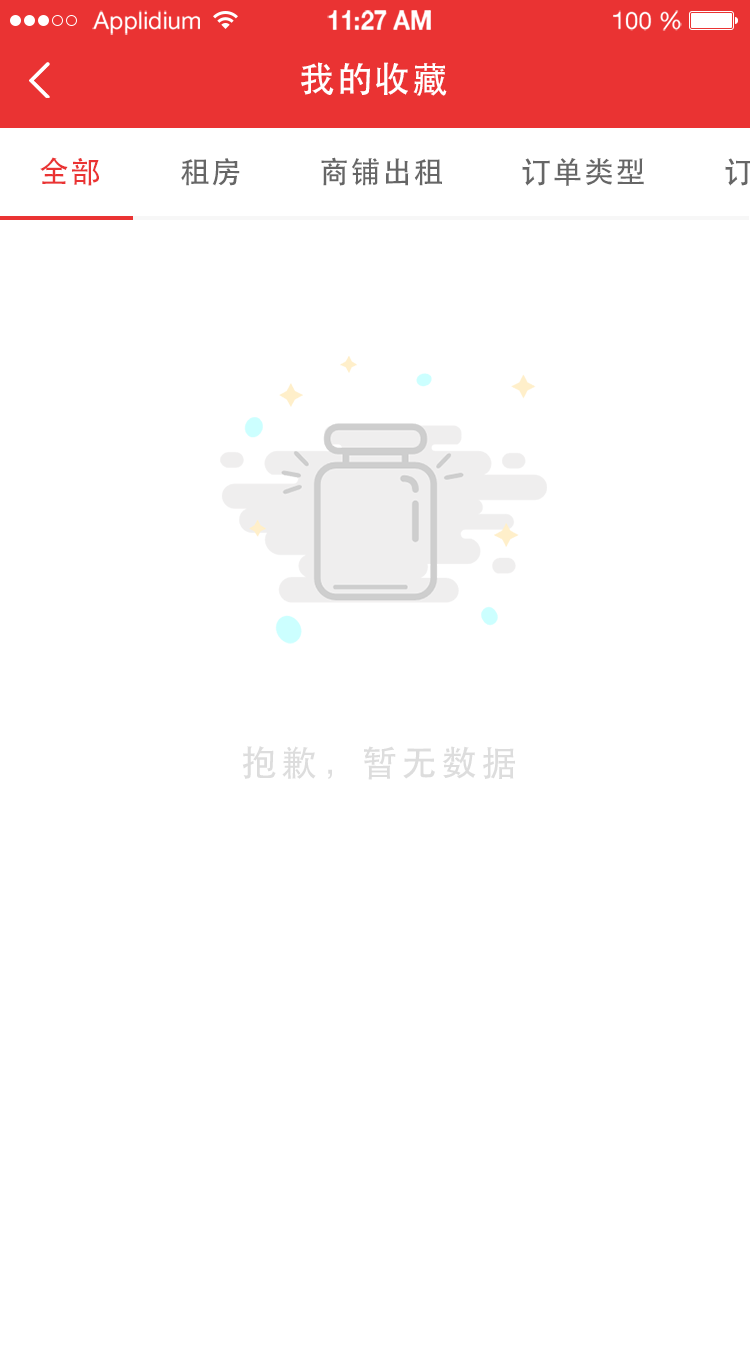
<style>
.page{position:relative;width:750px;height:1358px;background:#ffffff}
.page>*{position:absolute;margin:0}
.t1{font:24px "HelveticaNeueLTStd-Roman";color:#ffffff}
.t2{font:24px "HelveticaNeueLTStd-Bd";color:#ffffff}
.t3{font:36px "STHeiti";letter-spacing:0.05em;color:#ffffff}
.t4{font:30px "STHeiti";letter-spacing:0.05em;color:#ea3333}
.t5{font:30px "STHeiti";letter-spacing:0.05em;color:#666666}
.t6{font:36px "STHeiti";letter-spacing:0.11em;color:#dddddd}
</style>
<div class="page">
<p class="t1" style="left:92px;top:10px;width:108px;height:25px">Applidium</p>
<p class="t2" style="left:327px;top:10px;width:104px;height:20px">11:27 AM</p>
<p class="t1" style="left:613px;top:10px;width:69px;height:21px">100 %</p>
<p class="t3" style="left:301px;top:62px;width:146px;height:34px">我的收藏</p>
<p class="t4" style="left:40px;top:157px;width:59px;height:29px">全部</p>
<p class="t5" style="left:181px;top:158px;width:59px;height:28px">租房</p>
<p class="t5" style="left:321px;top:157px;width:121px;height:29px">商铺出租</p>
<p class="t5" style="left:522px;top:158px;width:122px;height:28px">订单类型</p>
<p class="t6" style="left:242px;top:746px;width:273px;height:34px">抱歉，暂无数据</p>
</div>
